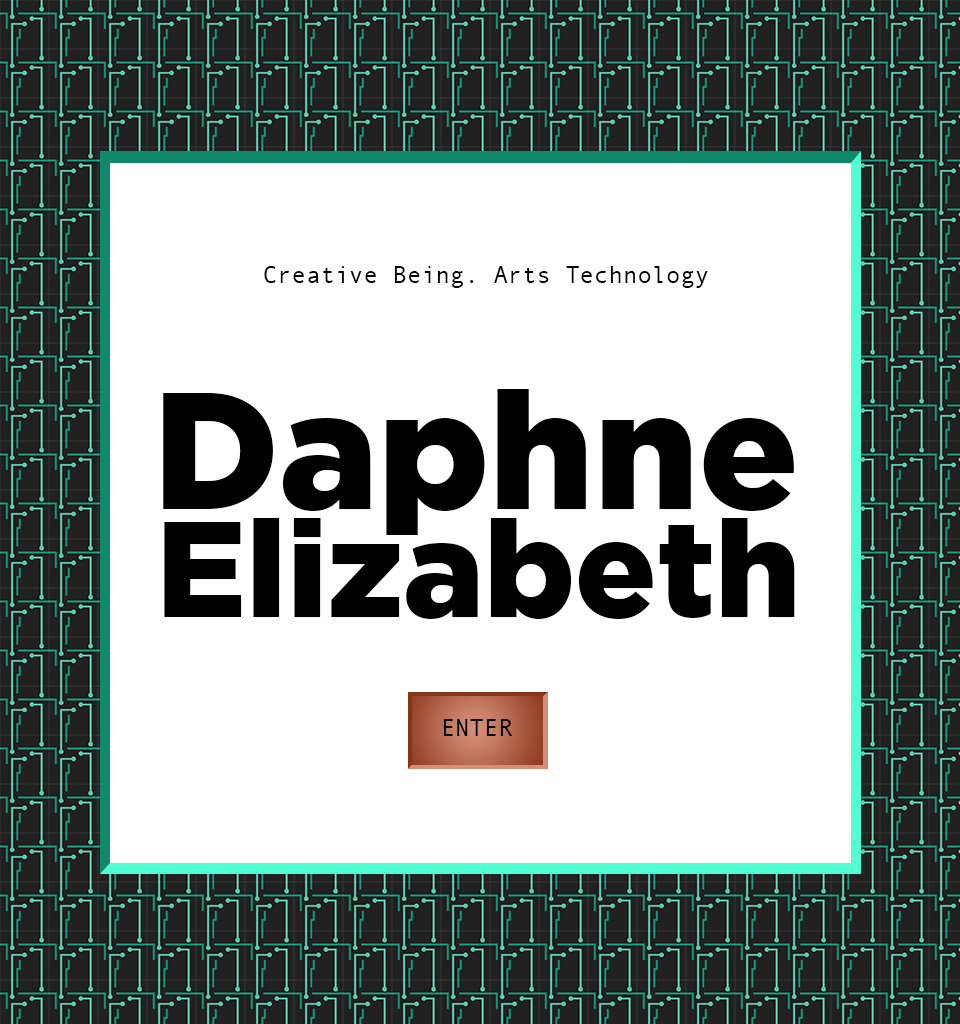
<style>
.page{position:relative;width:960px;height:1024px;background:#ffffff}
.page>*{position:absolute;margin:0}
.t1{font:24px "AndaleMono";color:#000000}
.t2{font:165px "GothamBlack";color:#000000}
.t3{font:135px "GothamBlack";color:#000000}
</style>
<div class="page">
<p class="t1" style="left:264px;top:266px;width:444px;height:22px">Creative Being. Arts Technology</p>
<p class="t2" style="left:163px;top:389px;width:631px;height:146px">Daphne</p>
<p class="t3" style="left:164px;top:518px;width:631px;height:101px">Elizabeth</p>
<p class="t1" style="left:443px;top:719px;width:70px;height:17px">ENTER</p>
</div>
